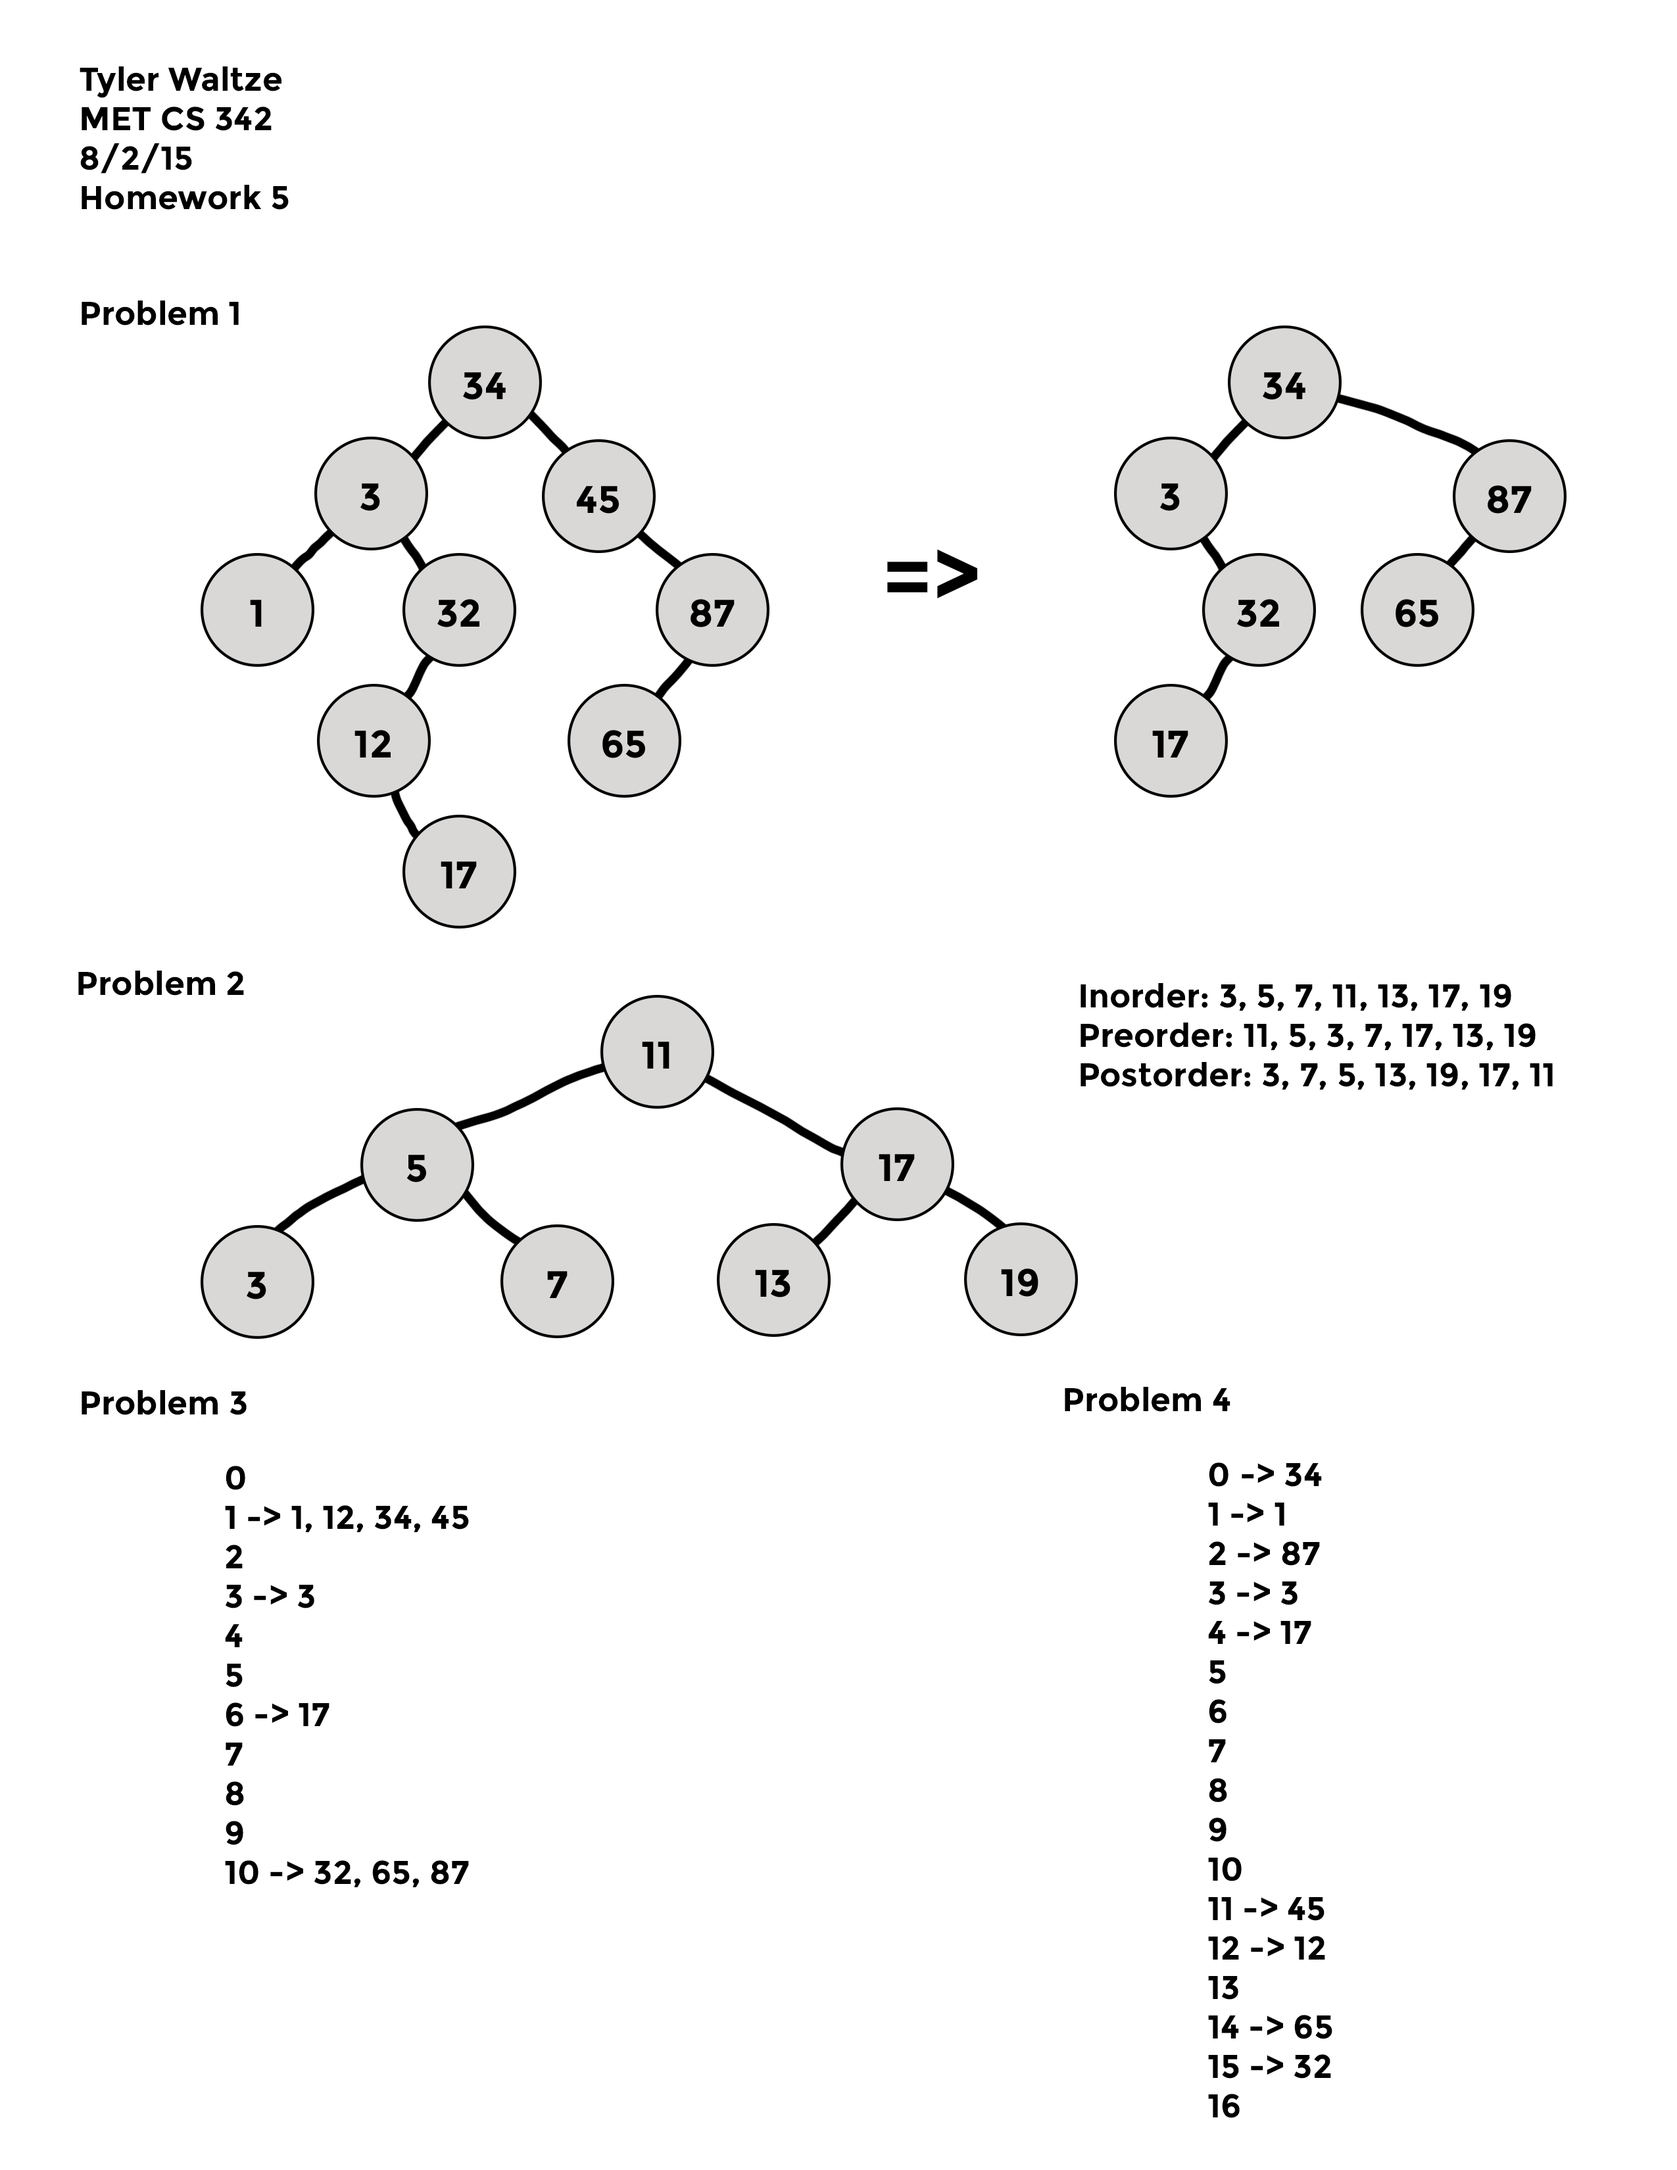
<style>
.page{position:relative;width:1677px;height:2170px;background:#ffffff}
.page>*{position:absolute;margin:0}
.t1{font:7.9px "Montserrat-Bold";color:#000000}
.t2{font:32.9px "Montserrat-Bold";color:#000000}
.t3{font:82.2px "Montserrat-Bold";color:#000000}
</style>
<div class="page">
<p class="t1" style="left:80px;top:66px;width:209px;height:144px">Tyler Waltze<br>MET CS 342<br>8/2/15<br>Homework 5</p>
<p class="t2" style="left:82px;top:300px;width:157px;height:25px">Problem 1</p>
<p class="t3" style="left:887px;top:549px;width:90px;height:49px">=&gt;</p>
<p class="t2" style="left:78px;top:971px;width:166px;height:24px">Problem 2</p>
<p class="t2" style="left:1080px;top:983px;width:472px;height:107px">Inorder: 3, 5, 7, 11, 13, 17, 19<br>Preorder: 11, 5, 3, 7, 17, 13, 19<br>Postorder: 3, 7, 5, 13, 19, 17, 11</p>
<p class="t1" style="left:82px;top:1390px;width:165px;height:25px">Problem 3</p>
<p class="t1" style="left:1065px;top:1387px;width:165px;height:25px">Problem 4</p>
<p class="t1" style="left:225px;top:1466px;width:244px;height:421px">0 <br>1 -&gt; 1, 12, 34, 45<br>2<br>3 -&gt; 3<br>4<br>5<br>6 -&gt; 17<br>7<br>8<br>9<br>10 -&gt; 32, 65, 87</p>
<p class="t1" style="left:1208px;top:1462px;width:124px;height:656px">0  -&gt; 34<br>1 -&gt; 1<br>2 -&gt; 87<br>3 -&gt; 3<br>4 -&gt; 17<br>5<br>6<br>7<br>8<br>9<br>10<br>11 -&gt; 45<br>12 -&gt; 12<br>13<br>14 -&gt; 65<br>15 -&gt; 32<br>16</p>
</div>
